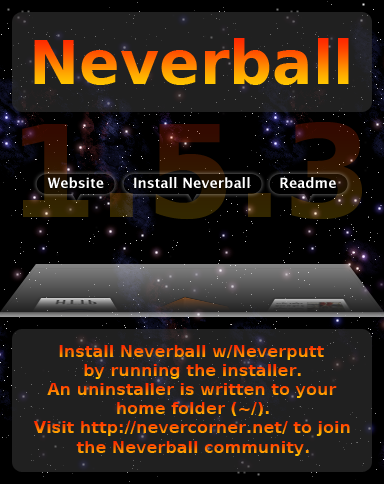
<style>
.page{position:relative;width:384px;height:484px;background:#202020}
.page>*{position:absolute;margin:0}
.t1{font:60px "DejaVuSans-Bold"}
.t2{font:128px "DejaVuSans-Bold";color:#331700}
.t3{font:14px "LucidaGrande-Bold";color:#ffffff}
.t4{font:16px "DejaVuSans-Bold"}
</style>
<div class="page">
<p class="t1" style="left:34px;top:38px;width:315px;height:47px">Neverball</p>
<p class="t2" style="left:22px;top:122px;width:340px;height:98px">1.5.3</p>
<p class="t3" style="left:47px;top:177px;width:57px;height:11px">Website</p>
<p class="t3" style="left:134px;top:177px;width:116px;height:11px">Install Neverball</p>
<p class="t3" style="left:280px;top:177px;width:56px;height:11px">Readme</p>
<p class="t4" style="left:59px;top:345px;width:265px;height:15px">Install Neverball w/Neverputt</p>
<p class="t4" style="left:84px;top:364px;width:217px;height:15px">by running the installer.</p>
<p class="t4" style="left:47px;top:383px;width:290px;height:15px">An uninstaller is written to your</p>
<p class="t4" style="left:117px;top:402px;width:152px;height:14px">home folder (~/).</p>
<p class="t4" style="left:33px;top:421px;width:317px;height:15px">Visit http://nevercorner.net/ to join</p>
<p class="t4" style="left:76px;top:441px;width:233px;height:15px">the Neverball community.</p>
</div>
